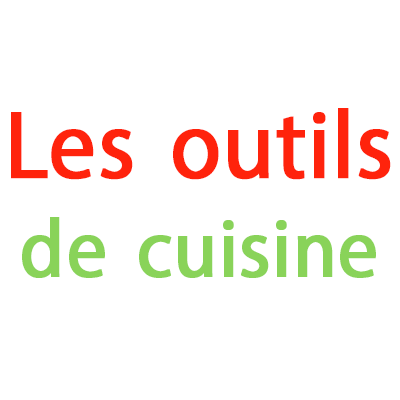
<style>
.page{position:relative;width:400px;height:400px;background:#ffffff}
.page>*{position:absolute;margin:0}
.t1{font:97px "MyriadPro-Regular";color:#ff230c;font-weight:bold;scale:0.94 1}
.t2{font:82.8px "MyriadPro-Regular";color:#89d359;font-weight:bold;scale:0.94 1}
</style>
<div class="page">
<p class="t1" style="left:11px;top:108px;width:380px;height:170px;text-align:center">Les outils<br><span class="t2">de cuisine</span></p>
</div>
